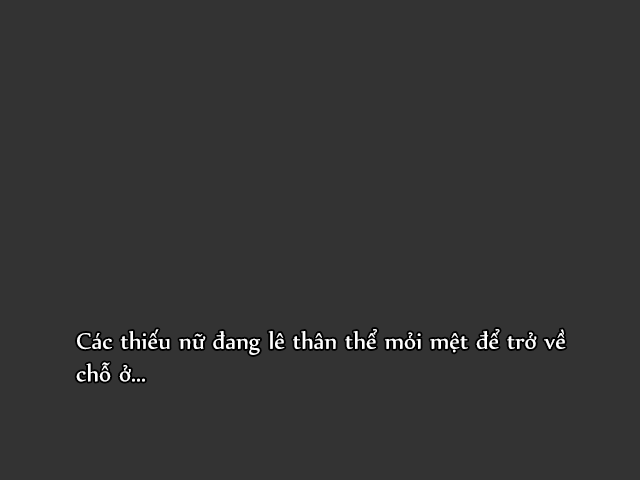
<style>
.page{position:relative;width:640px;height:480px;background:#333333}
.page>*{position:absolute;margin:0}
.t1{font:27px "UTM-Nyala";color:#ffffff}
</style>
<div class="page">
<p class="t1" style="left:76px;top:329px;width:490px;height:53px">Các thiếu nữ đang lê thân thể mỏi mệt để trở về chỗ ở...</p>
</div>
